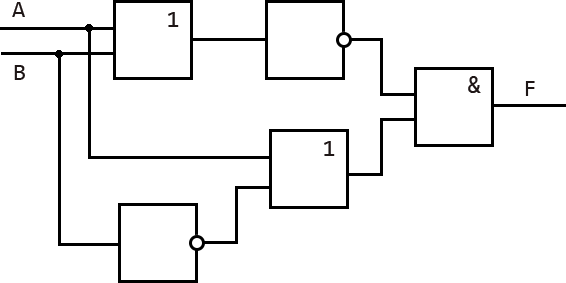
<style>
.page{position:relative;width:566px;height:283px;background:#ffffff}
.page>*{position:absolute;margin:0}
.t1{font:24px "Consolas";color:#1e1616}
</style>
<div class="page">
<p class="t1" style="left:12px;top:2px;width:13px;height:15px">A</p>
<p class="t1" style="left:14px;top:65px;width:11px;height:15px">B</p>
<p class="t1" style="left:525px;top:81px;width:10px;height:15px">F</p>
</div>
